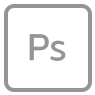
<style>
.page{position:relative;width:95px;height:95px;background:#ffffff}
.page>*{position:absolute;margin:0}
.t1{font:35px "GodoM";color:#959595}
</style>
<div class="page">
<p class="t1" style="left:29px;top:34px;width:37px;height:27px">Ps</p>
</div>
